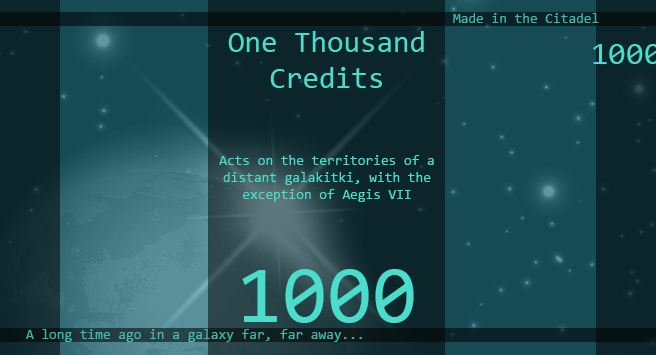
<style>
.page{position:relative;width:656px;height:355px;background:#0b252a}
.page>*{position:absolute;margin:0}
.t1{font:14px "Consolas";color:#3db9ac}
.t2{font:30px "Consolas";color:#4addcc}
.t3{font:14px "Consolas";color:#4addcc}
.t4{font:82px "Consolas";color:#4addcc}
.t5{font:14px "Consolas";color:#3fb9ab}
</style>
<div class="page">
<p class="t1" style="left:453px;top:13px;width:146px;height:10px">Made in the Citadel</p>
<p class="t2" style="left:228px;top:31px;width:196px;height:57px;text-align:center">One Thousand<br>Credits</p>
<p class="t3" style="left:219px;top:155px;width:215px;height:47px;text-align:center">Acts on the territories of a distant galakitki, with the exception of Aegis VII</p>
<p class="t4" style="left:242px;top:269px;width:172px;height:54px;text-align:center">1000<br>0</p>
<p class="t5" style="left:26px;top:329px;width:336px;height:13px">A long time ago in a galaxy far, far away...</p>
</div>
